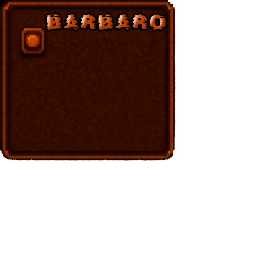
<style>
.page{position:relative;width:256px;height:256px;background:#ffffff}
.page>*{position:absolute;margin:0}
.t1{font:20px "AfterShok"}
</style>
<div class="page">
<p class="t1" style="left:47px;top:14px;width:119px;height:16px">BArbaro</p>
</div>
